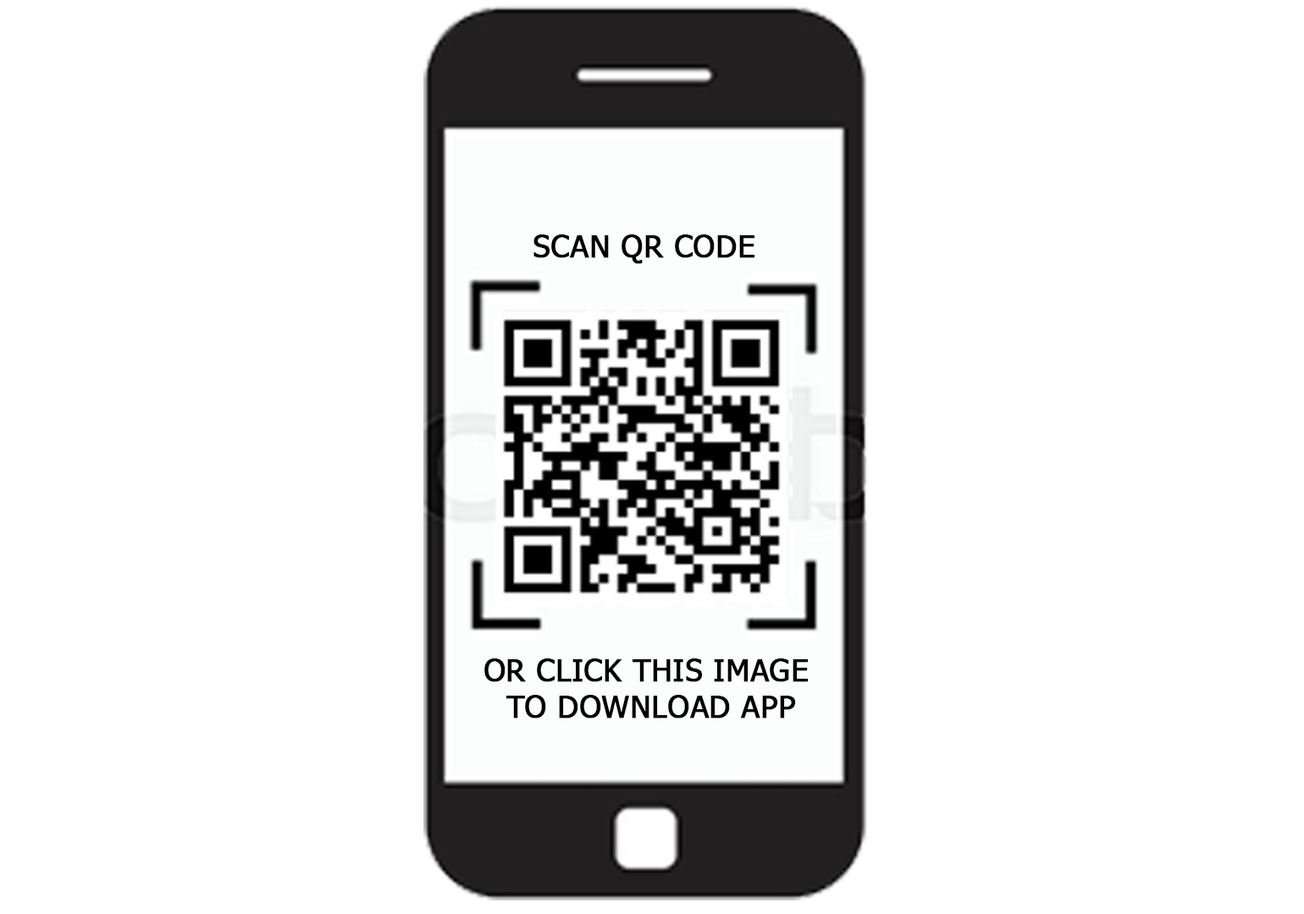
<style>
.page{position:relative;width:1304px;height:914px;background:#ffffff}
.page>*{position:absolute;margin:0}
.t1{font:30.7px "Tahoma";color:#000000;font-weight:bold}
</style>
<div class="page">
<p class="t1" style="left:533px;top:235px;width:221px;height:29px">SCAN QR CODE</p>
<p class="t1" style="left:484px;top:659px;width:324px;height:60px;text-align:center">OR CLICK THIS IMAGE <br>TO DOWNLOAD APP</p>
</div>
